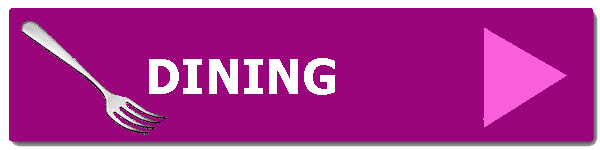
<style>
.page{position:relative;width:600px;height:150px;background:#9a057c}
.page>*{position:absolute;margin:0}
.t1{font:48px "Tahoma-Bold";color:#ffffff}
</style>
<div class="page">
<p class="t1" style="left:149px;top:58px;width:186px;height:37px">DINING</p>
</div>
